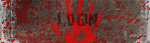
<style>
.page{position:relative;width:150px;height:43px}
.page>*{position:absolute;margin:0}
.t1{font:18.6px "28DaysLater"}
</style>
<div class="page">
<p class="t1" style="left:57px;top:13px;width:41px;height:14px">Login</p>
</div>
